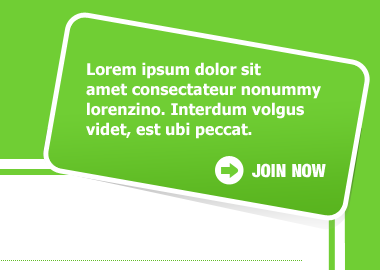
<style>
.page{position:relative;width:380px;height:270px;background:#70ce34}
.page>*{position:absolute;margin:0}
.t1{font:16px/20px "Tahoma-Bold";color:#ffffff}
.t2{font:18px "Harvest";color:#ffffff;text-transform:uppercase}
</style>
<div class="page">
<p class="t1" style="left:86px;top:62px;width:235px;height:77px">Lorem ipsum dolor sit <br>amet consectateur nonummy <br>lorenzino. Interdum volgus <br>videt, est ubi peccat.</p>
<p class="t2" style="left:252px;top:163px;width:74px;height:15px">join now</p>
</div>
